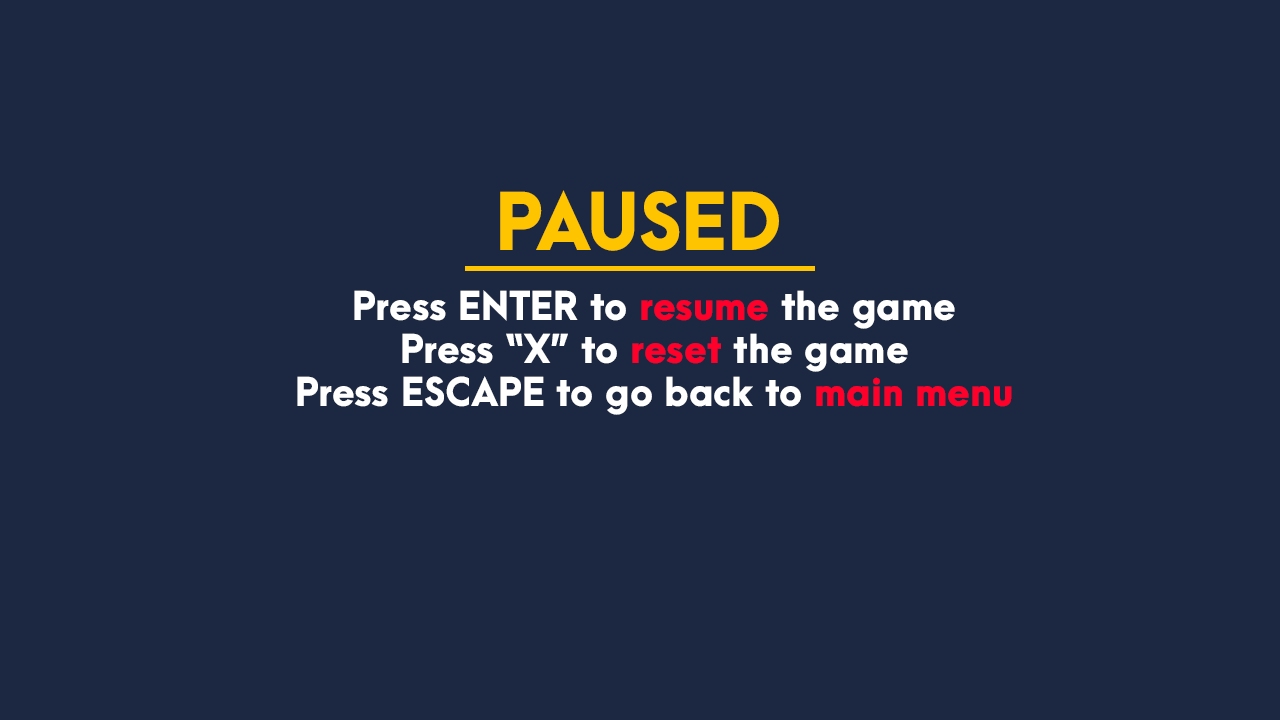
<style>
.page{position:relative;width:1280px;height:720px;background:#1c2841}
.page>*{position:absolute;margin:0}
.t1{font:72px "ArcaMajora3-Heavy";color:#ffc400}
.t2{font:36px "ArcaMajora3-Heavy";color:#ffffff}
.t3{font:36px "ArcaMajora3-Heavy";color:#ff002a}
</style>
<div class="page">
<p class="t1" style="left:500px;top:190px;width:279px;height:61px">PAUSED</p>
<p class="t2" style="left:297px;top:290px;width:715px;height:125px;text-align:center">Press ENTER to <span class="t3">resume</span> the game<br>Press “X” to <span class="t3">reset</span> the game<br>Press ESCAPE to go back to <span class="t3">main menu</span></p>
</div>
